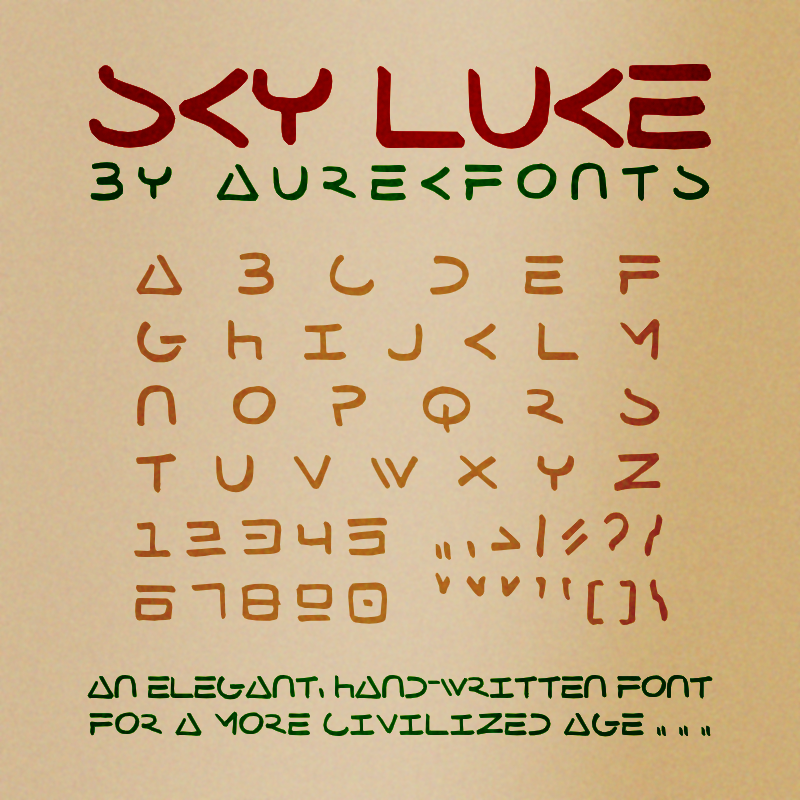
<style>
.page{position:relative;width:800px;height:800px}
.page>*{position:absolute;margin:0}
.t1{font:120px "SkyLuke";color:#790000}
.t2{font:50px "SkyLuke";letter-spacing:0.27em;color:#003300}
.t3{font:54.9px "SkyLuke";letter-spacing:0.26em;color:#a75b1c}
.t4{font:54.9px "SkyLuke";letter-spacing:0.99em;color:#a75b1c}
.t5{font:54.9px "SkyLuke";letter-spacing:0.73em;color:#a75b1c}
.t6{font:54.9px "SkyLuke";letter-spacing:1em;color:#a75b1c}
.t7{font:54.9px "SkyLuke";letter-spacing:0.7em;color:#a75b1c}
.t8{font:31px "SkyLuke";letter-spacing:0.037em;color:#002f00}
.t9{font:31px "SkyLuke";color:#002f00}
</style>
<div class="page">
<p class="t1" style="left:89px;top:64px;width:623px;height:86px">sky luke</p>
<p class="t2" style="left:90px;top:162px;width:620px;height:40px">by aurekfonts</p>
<p class="t3" style="left:134px;top:252px;width:534px;height:374px;text-align:center"><span class="t4">abcdef<br></span><span class="t5">ghijklm<br></span><span class="t6">nopqrs<br></span><span class="t7">tuvwxyz<br></span>12345 .,:;!?/<br>67890 "“”‘’()\</p>
<p class="t8" style="left:87px;top:674px;width:626px;height:63px;text-align:center"><span class="t9">An elegant, hand-written font<br></span>for a more civilized age . . .</p>
</div>
